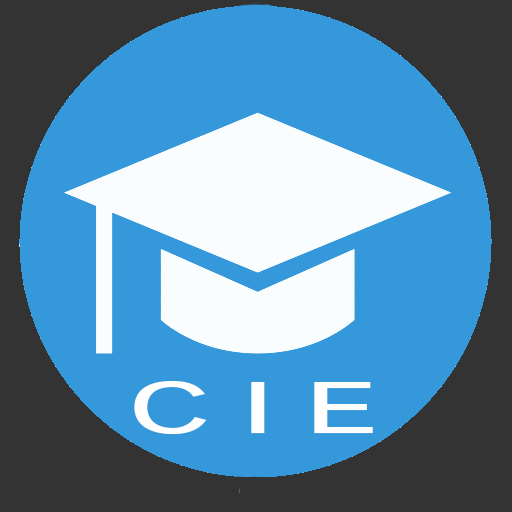
<style>
.page{position:relative;width:512px;height:512px;background:#3498db}
.page>*{position:absolute;margin:0}
.t1{font:72px "Kalinga-Bold";color:#ffffff;scale:1.57 1}
</style>
<div class="page">
<p class="t1" style="left:134px;top:381px;width:239px;height:53px">C I E</p>
</div>
